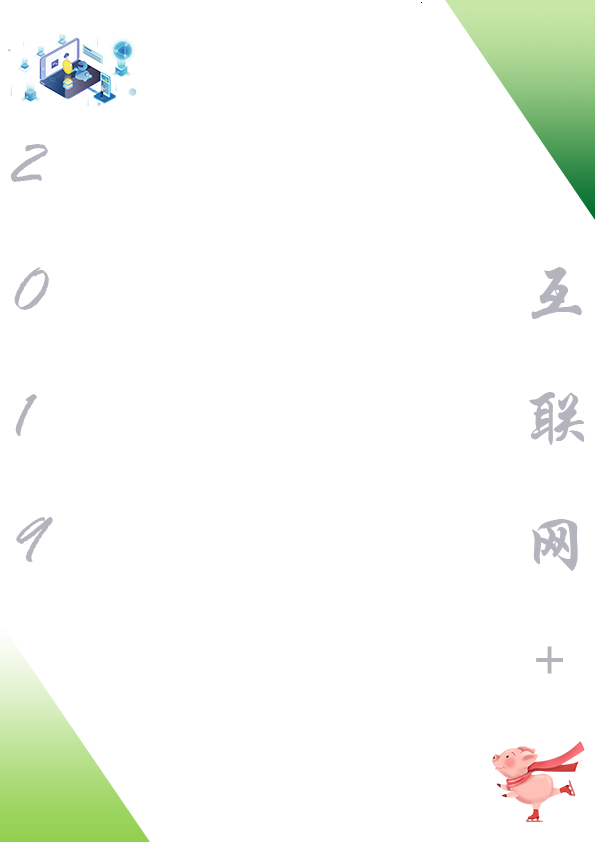
<style>
.page{position:relative;width:595px;height:842px;background:#ffffff}
.page>*{position:absolute;margin:0}
.t1{font:72px "RageItalic";color:#b4b4be}
.t2{font:72px "STXingkai";color:#b4b4be}
.t3{font:50px "STXingkai";color:#b4b4be}
</style>
<div class="page">
<p class="t1" style="left:11px;top:144px;width:42px;height:418px">2<br>0<br>1<br>9</p>
<p class="t2" style="left:529px;top:267px;width:56px;height:407px">互<br>联<br>网<br><span class="t3"> +</span></p>
</div>
